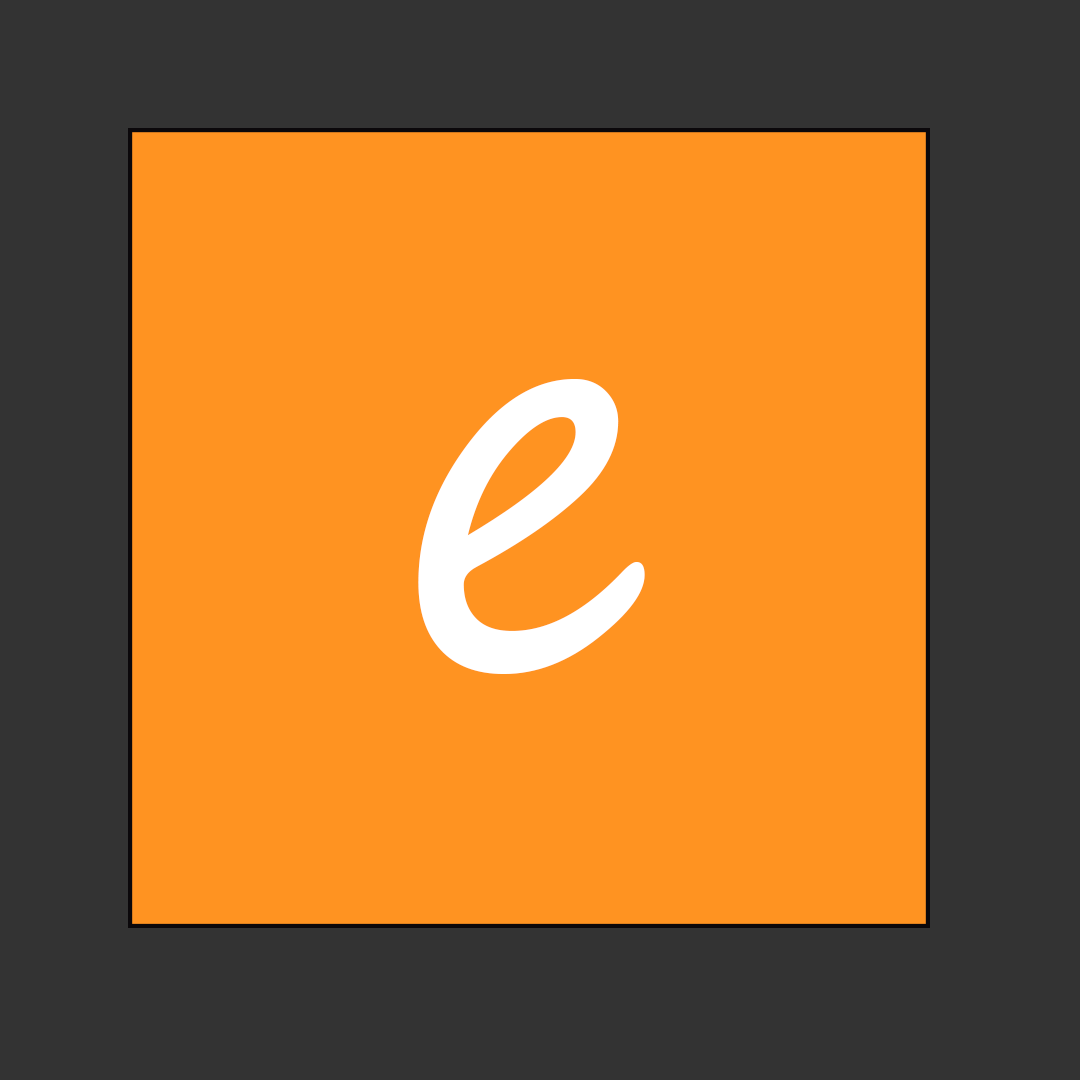
<style>
.page{position:relative;width:1080px;height:1080px;background:#ff9321}
.page>*{position:absolute;margin:0}
.t1{font:520.8px "SegoePrint";color:#ffffff}
</style>
<div class="page">
<p class="t1" style="left:418px;top:379px;width:227px;height:295px">e</p>
</div>
